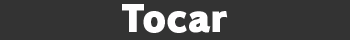
<style>
.page{position:relative;width:350px;height:40px;background:#333333}
.page>*{position:absolute;margin:0}
.t1{font:36px "RodinPro-UB";letter-spacing:-0.002em;color:#fffeff}
</style>
<div class="page">
<p class="t1" style="left:122px;top:4px;width:106px;height:29px">Tocar</p>
</div>
